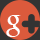
<style>
.page{position:relative;width:40px;height:40px;background:#db5a3c}
.page>*{position:absolute;margin:0}
.t1{font:28px "Catull-Regular";color:#ffffff}
</style>
<div class="page">
<p class="t1" style="left:6px;top:15px;width:15px;height:22px">g</p>
</div>
